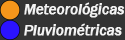
<style>
.page{position:relative;width:125px;height:40px;background:#333333}
.page>*{position:absolute;margin:0}
.t1{font:25px "FranklinGothic-MediumItalic";color:#f3f3f3;font-weight:bold}
</style>
<div class="page">
<p class="t1" style="left:24px;top:2px;width:101px;height:16px">Meteorológicas</p>
<p class="t1" style="left:24px;top:23px;width:98px;height:13px">Pluviométricas</p>
</div>
